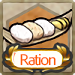
<style>
.page{position:relative;width:75px;height:75px}
.page>*{position:absolute;margin:0}
.t1{font:16px "AdobeClean-Regular";letter-spacing:-0.08em;color:#ff5a00}
</style>
<div class="page">
<p class="t1" style="left:20px;top:54px;width:36px;height:12px">Ration</p>
</div>
